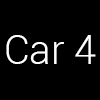
<style>
.page{position:relative;width:100px;height:100px;background:#000000}
.page>*{position:absolute;margin:0}
.t1{font:40px "Roboto-Light";color:#ffffff}
</style>
<div class="page">
<p class="t1" style="left:6px;top:35px;width:90px;height:29px">Car 4</p>
</div>
